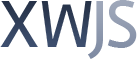
<style>
.page{position:relative;width:140px;height:59px;background:#ffffff}
.page>*{position:absolute;margin:0}
.t1{font:69.2px "RamblaAltStd";letter-spacing:-0.01em;color:#32415b}
.t2{font:69.2px "RamblaAltStd";letter-spacing:-0.01em;color:#7e8aa2}
</style>
<div class="page">
<p class="t1" style="left:0px;top:1px;width:92px;height:46px">XW</p>
<p class="t2" style="left:88px;top:0px;width:49px;height:59px">JS</p>
</div>
